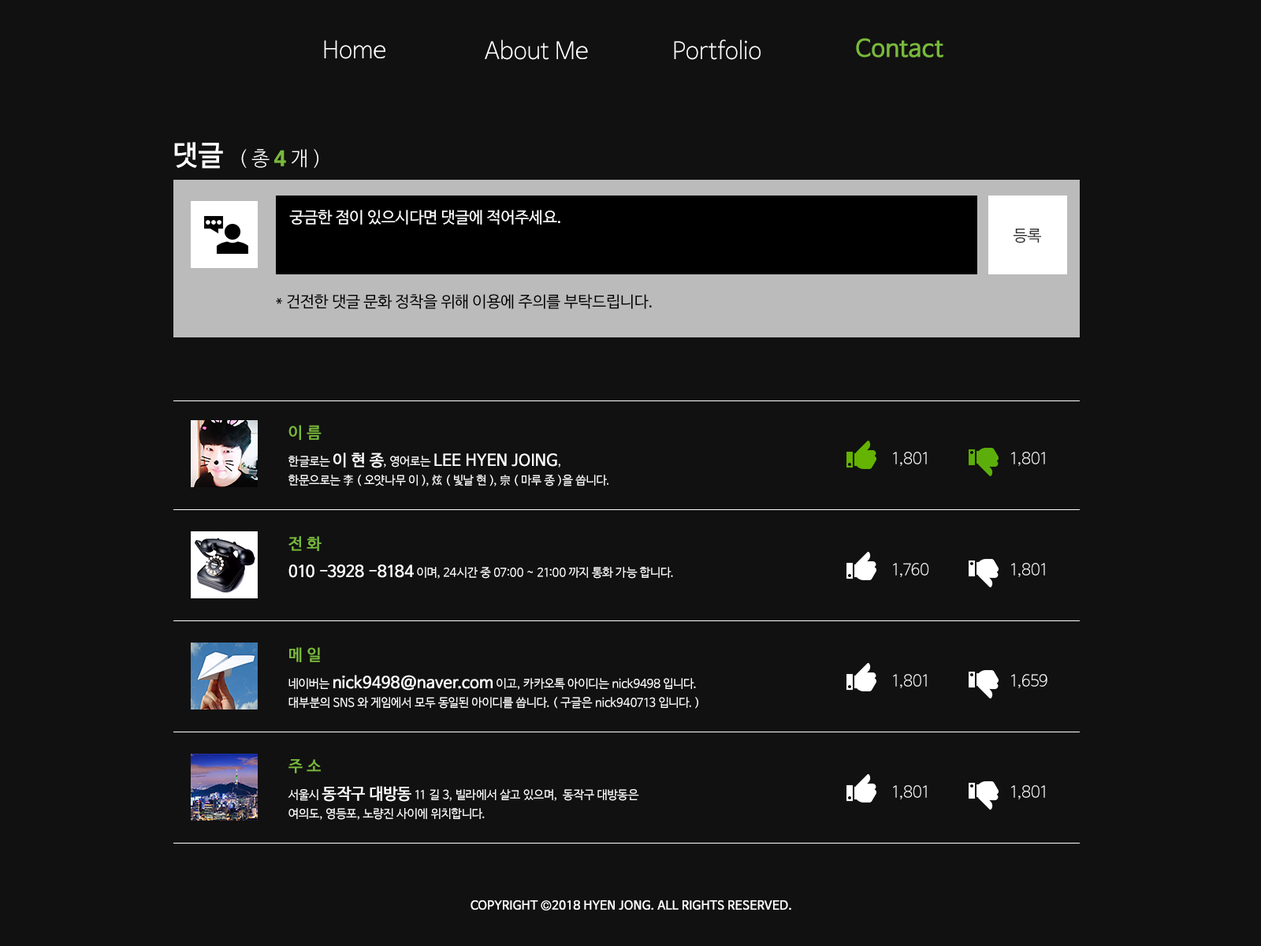
<style>
.page{position:relative;width:1261px;height:946px;background:#111111}
.page>*{position:absolute;margin:0}
.t1{font:23.6px "NanumBarunGothicLight";color:#ffffff}
.t2{font:23.6px "NanumBarunGothic";color:#79b93c;font-weight:bold}
.t3{font:27.6px "NanumBarunGothic";color:#ffffff;font-weight:bold}
.t4{font:19.7px "NanumBarunGothicLight";color:#ffffff}
.t5{font:19.7px "NanumBarunGothicBold";color:#79b93c;font-weight:bold}
.t6{font:15.8px "NanumBarunGothic";color:#ffffff}
.t7{font:15.8px "NanumBarunGothic";color:#343434}
.t8{font:15.8px "NanumBarunGothic";color:#010101}
.t9{font:15.8px "NanumBarunGothic";color:#79b93c;font-weight:bold}
.t10{font:11.8px/18.9px "NanumBarunGothic";color:#fefefe}
.t11{font:15.8px/18.9px "NanumBarunGothic";color:#fefefe;font-weight:bold}
.t12{font:15.8px "NanumBarunGothicLight";color:#ffffff}
.t13{font:11.8px "NanumBarunGothic";color:#fefefe}
.t14{font:15.8px "NanumBarunGothic";color:#fefefe;font-weight:bold}
.t15{font:11.8px "NanumBarunGothic";color:#fefefe;font-weight:bold}
</style>
<div class="page">
<p class="t1" style="left:324px;top:40px;width:61px;height:19px">Home</p>
<p class="t1" style="left:485px;top:39px;width:103px;height:21px">About Me</p>
<p class="t1" style="left:674px;top:39px;width:86px;height:21px">Portfolio</p>
<p class="t2" style="left:856px;top:38px;width:87px;height:20px">Contact</p>
<p class="t3" style="left:174px;top:142px;width:49px;height:27px">댓글</p>
<p class="t4" style="left:241px;top:149px;width:77px;height:19px">( 총 <span class="t5">4 </span>개 )</p>
<p class="t6" style="left:289px;top:210px;width:271px;height:15px">궁금한 점이 있으시다면 댓글에 적어주세요.</p>
<p class="t7" style="left:1013px;top:229px;width:28px;height:14px">등록</p>
<p class="t8" style="left:276px;top:294px;width:376px;height:15px">* 건전한 댓글 문화 정착을 위해 이용에 주의를 부탁드립니다.</p>
<p class="t9" style="left:288px;top:425px;width:34px;height:15px">이 름</p>
<p class="t10" style="left:288px;top:452px;width:320px;height:34px">한글로는 <span class="t11">이 현 종</span>, 영어로는 <span class="t11">LEE HYEN JOING</span>,<br>한문으로는 李 ( 오얏나무 이 ), 炫 ( 빛날 현 ), 宗 ( 마루 종 )을 씁니다.</p>
<p class="t12" style="left:893px;top:452px;width:34px;height:14px">1,801</p>
<p class="t12" style="left:1011px;top:452px;width:34px;height:14px">1,801</p>
<p class="t9" style="left:288px;top:536px;width:34px;height:15px">전 화</p>
<p class="t13" style="left:288px;top:564px;width:385px;height:14px"><span class="t14">010 -3928 -8184</span> 이며, 24시간 중 07:00 ~ 21:00 까지 통화 가능 합니다.</p>
<p class="t12" style="left:893px;top:563px;width:35px;height:14px">1,760</p>
<p class="t12" style="left:1011px;top:563px;width:34px;height:14px">1,801</p>
<p class="t9" style="left:289px;top:647px;width:31px;height:15px">메 일</p>
<p class="t10" style="left:288px;top:675px;width:410px;height:33px">네이버는 <span class="t11">nick9498@naver.com</span> 이고, 카카오톡 아이디는 nick9498 입니다.<br>대부분의 SNS 와 게임에서 모두 동일된 아이디를 씁니다. ( 구글은 nick940713 입니다. )</p>
<p class="t12" style="left:893px;top:674px;width:34px;height:14px">1,801</p>
<p class="t12" style="left:1011px;top:674px;width:36px;height:14px">1,659</p>
<p class="t9" style="left:288px;top:759px;width:33px;height:14px">주 소</p>
<p class="t10" style="left:288px;top:786px;width:351px;height:34px">서울시 <span class="t11">동작구 대방동</span> 11 길 3, 빌라에서 살고 있으며,  동작구 대방동은 <br>여의도, 영등포, 노량진 사이에 위치합니다.</p>
<p class="t12" style="left:893px;top:785px;width:34px;height:14px">1,801</p>
<p class="t12" style="left:1011px;top:785px;width:34px;height:14px">1,801</p>
<p class="t15" style="left:470px;top:900px;width:321px;height:10px">COPYRIGHT ©2018 HYEN JONG. ALL RIGHTS RESERVED.</p>
</div>
